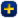
<style>
.page{position:relative;width:18px;height:18px}
.page>*{position:absolute;margin:0}
.t1{font:18px "Helvetica-Bold"}
</style>
<div class="page">
<p class="t1" style="left:4px;top:3px;width:10px;height:11px">+</p>
</div>
